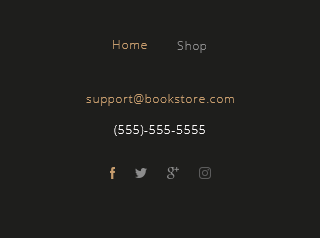
<style>
.page{position:relative;width:320px;height:238px;background:#1e1e1c}
.page>*{position:absolute;margin:0}
.t1{font:12px "OpenSans-Light";letter-spacing:0.05em;color:#c69c6d}
.t2{font:12px "OpenSans-Light";letter-spacing:0.05em;color:#8c8c8c}
.t3{font:12px "OpenSans-Light";letter-spacing:0.05em;color:#fdfbfb}
</style>
<div class="page">
<p class="t1" style="left:113px;top:40px;width:34px;height:9px">Home</p>
<p class="t2" style="left:177px;top:41px;width:29px;height:12px">Shop</p>
<p class="t1" style="left:86px;top:94px;width:148px;height:12px">support@bookstore.com</p>
<p class="t3" style="left:114px;top:125px;width:91px;height:11px">(555)-555-5555</p>
</div>
